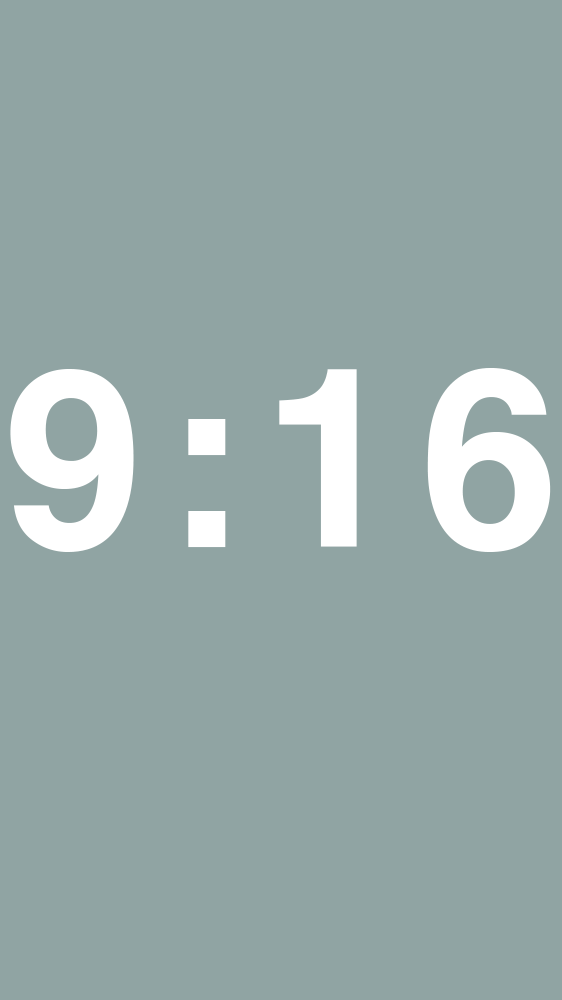
<style>
.page{position:relative;width:562px;height:1000px;background:#90a4a3}
.page>*{position:absolute;margin:0}
.t1{font:250px "Helvetica-Bold";letter-spacing:0.075em;color:#ffffff}
</style>
<div class="page">
<p class="t1" style="left:10px;top:368px;width:541px;height:184px">9:16</p>
</div>
